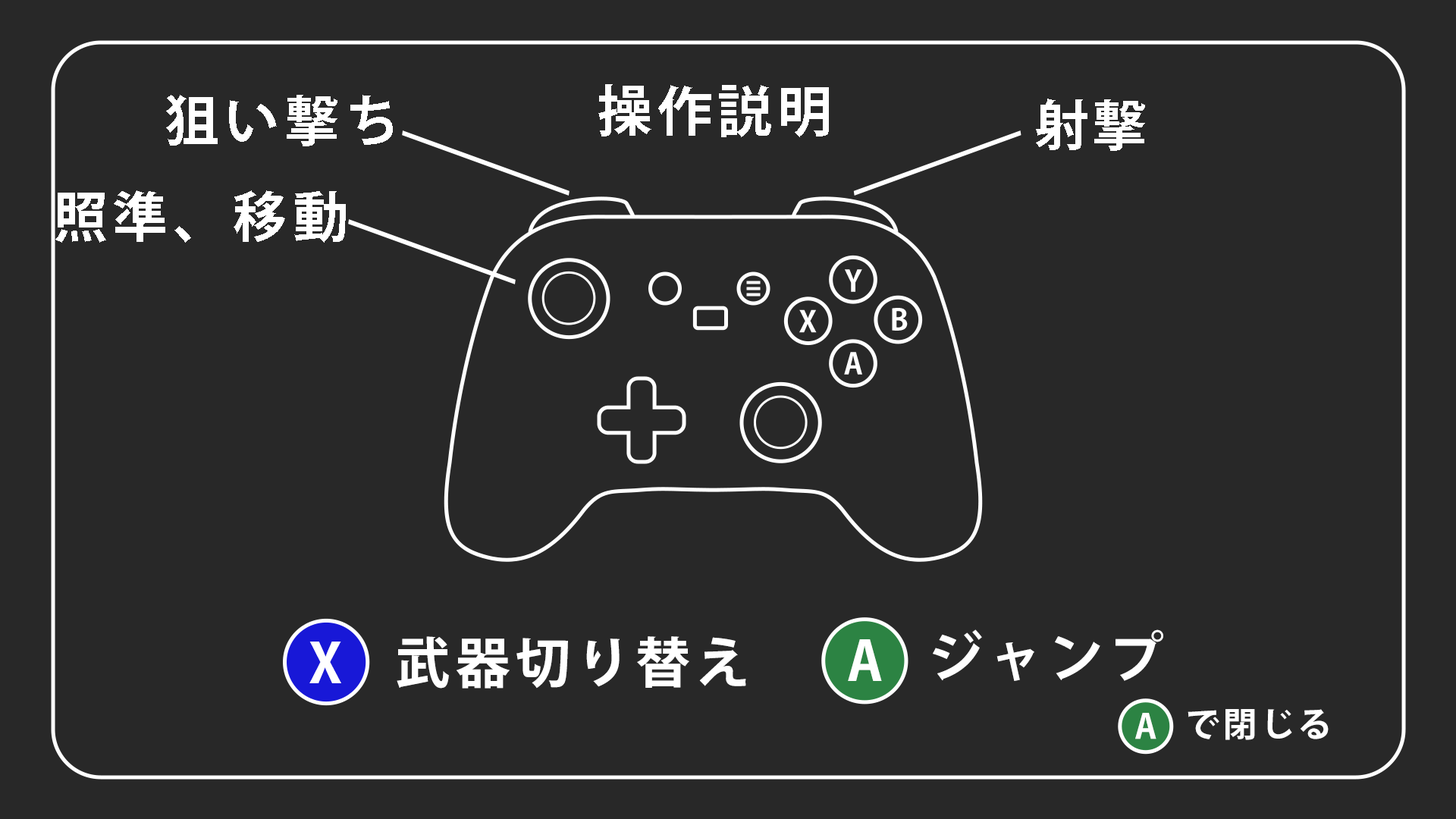
<style>
.page{position:relative;width:1456px;height:819px;background:#282828}
.page>*{position:absolute;margin:0}
.t1{font:54.6px "KozGoPr6N-Bold";letter-spacing:0.1em;color:#ffffff}
.t2{font:29.2px "KozGoPr6N-Bold";letter-spacing:0.1em;color:#ffffff}
.t3{font:54.2px "KozGoPr6N-Bold";letter-spacing:0.1em;color:#ffffff}
.t4{font:33.7px "KozGoPr6N-Bold";letter-spacing:0.1em;color:#ffffff}
.t5{font:34px "KozGoPr6N-Bold";letter-spacing:0.1em;color:#ffffff}
</style>
<div class="page">
<p class="t1" style="left:598px;top:84px;width:231px;height:53px">操作説明</p>
<p class="t1" style="left:166px;top:95px;width:227px;height:51px">狙い撃ち</p>
<p class="t1" style="left:1036px;top:99px;width:109px;height:52px">射撃</p>
<p class="t1" style="left:55px;top:190px;width:291px;height:53px">照準、移動</p>
<p class="t2" style="left:845px;top:269px;width:17px;height:23px">Y</p>
<p class="t2" style="left:799px;top:309px;width:18px;height:24px">X</p>
<p class="t2" style="left:892px;top:308px;width:16px;height:23px">B</p>
<p class="t2" style="left:844px;top:352px;width:18px;height:23px">A</p>
<p class="t1" style="left:933px;top:629px;width:230px;height:52px">ジャンプ</p>
<p class="t3" style="left:309px;top:642px;width:32px;height:41px">X</p>
<p class="t1" style="left:397px;top:636px;width:349px;height:53px">武器切り替えジャンプ</p>
<p class="t3" style="left:848px;top:639px;width:34px;height:42px">A</p>
<p class="t4" style="left:1135px;top:713px;width:21px;height:26px">A</p>
<p class="t5" style="left:1188px;top:709px;width:141px;height:31px">で閉じる</p>
</div>
